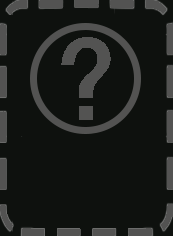
<style>
.page{position:relative;width:173px;height:236px;background:#0e110e}
.page>*{position:absolute;margin:0}
.t1{font:96px "GujaratiSangamMN-Bold";letter-spacing:0.05em;color:#535352}
</style>
<div class="page">
<p class="t1" style="left:61px;top:37px;width:50px;height:83px">?</p>
</div>
